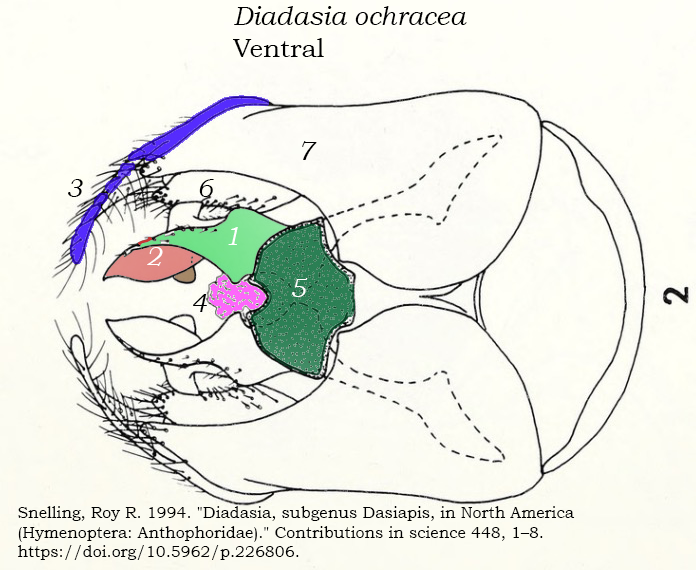
<style>
.page{position:relative;width:696px;height:570px}
.page>*{position:absolute;margin:0}
.t1{font:26px "BookmanOldStyle-Italic";color:#000000}
.t2{font:26px "BookmanOldStyle";color:#000000}
.t3{font:26px "BookmanOldStyle-Italic";color:#ffffff}
.t4{font:16px "BookmanOldStyle";color:#000000}
</style>
<div class="page">
<p class="t1" style="left:233px;top:6px;width:234px;height:51px">Diadasia ochracea<br><span class="t2">Ventral</span></p>
<p class="t1" style="left:302px;top:141px;width:15px;height:19px">7</p>
<p class="t1" style="left:68px;top:179px;width:15px;height:18px">3</p>
<p class="t1" style="left:199px;top:179px;width:15px;height:18px">6</p>
<p class="t3" style="left:228px;top:227px;width:10px;height:18px">1</p>
<p class="t3" style="left:147px;top:247px;width:16px;height:19px">2</p>
<p class="t3" style="left:292px;top:278px;width:15px;height:19px">5</p>
<p class="t1" style="left:193px;top:294px;width:14px;height:18px">4</p>
<p class="t4" style="left:18px;top:506px;width:557px;height:54px">Snelling, Roy R. 1994. "Diadasia, subgenus Dasiapis, in North America<br>(Hymenoptera: Anthophoridae)." Contributions in science 448, 1–8.<br>https://doi.org/10.5962/p.226806.</p>
</div>
